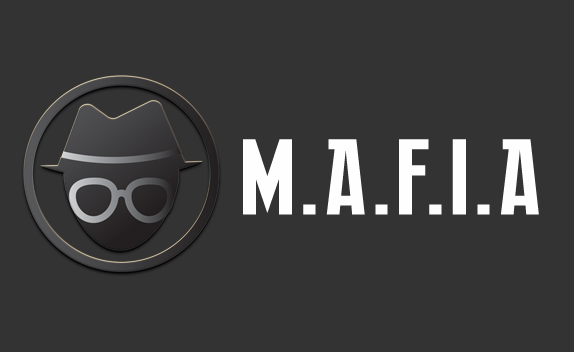
<style>
.page{position:relative;width:574px;height:352px;background:#333333}
.page>*{position:absolute;margin:0}
.t1{font:103.5px "AfterDisaster";letter-spacing:0.025em;color:#fffefe}
</style>
<div class="page">
<p class="t1" style="left:243px;top:139px;width:296px;height:76px">M.A.F.I.A</p>
</div>
